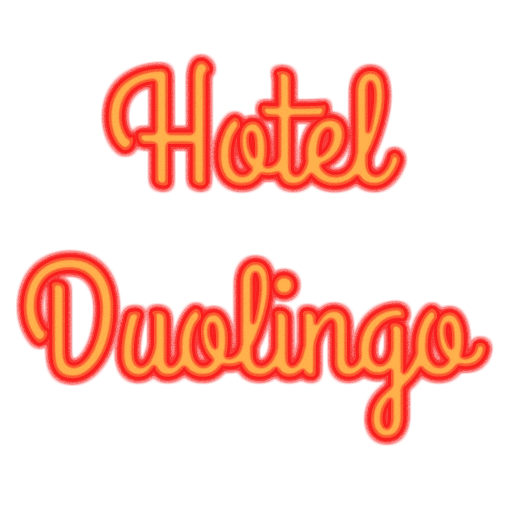
<style>
.page{position:relative;width:512px;height:512px;background:#ffffff}
.page>*{position:absolute;margin:0}
.t1{font:160px "GrandHotel-Regular"}
</style>
<div class="page">
<p class="t1" style="left:23px;top:61px;width:463px;height:377px;text-align:center">Hotel<br>Duolingo</p>
</div>
